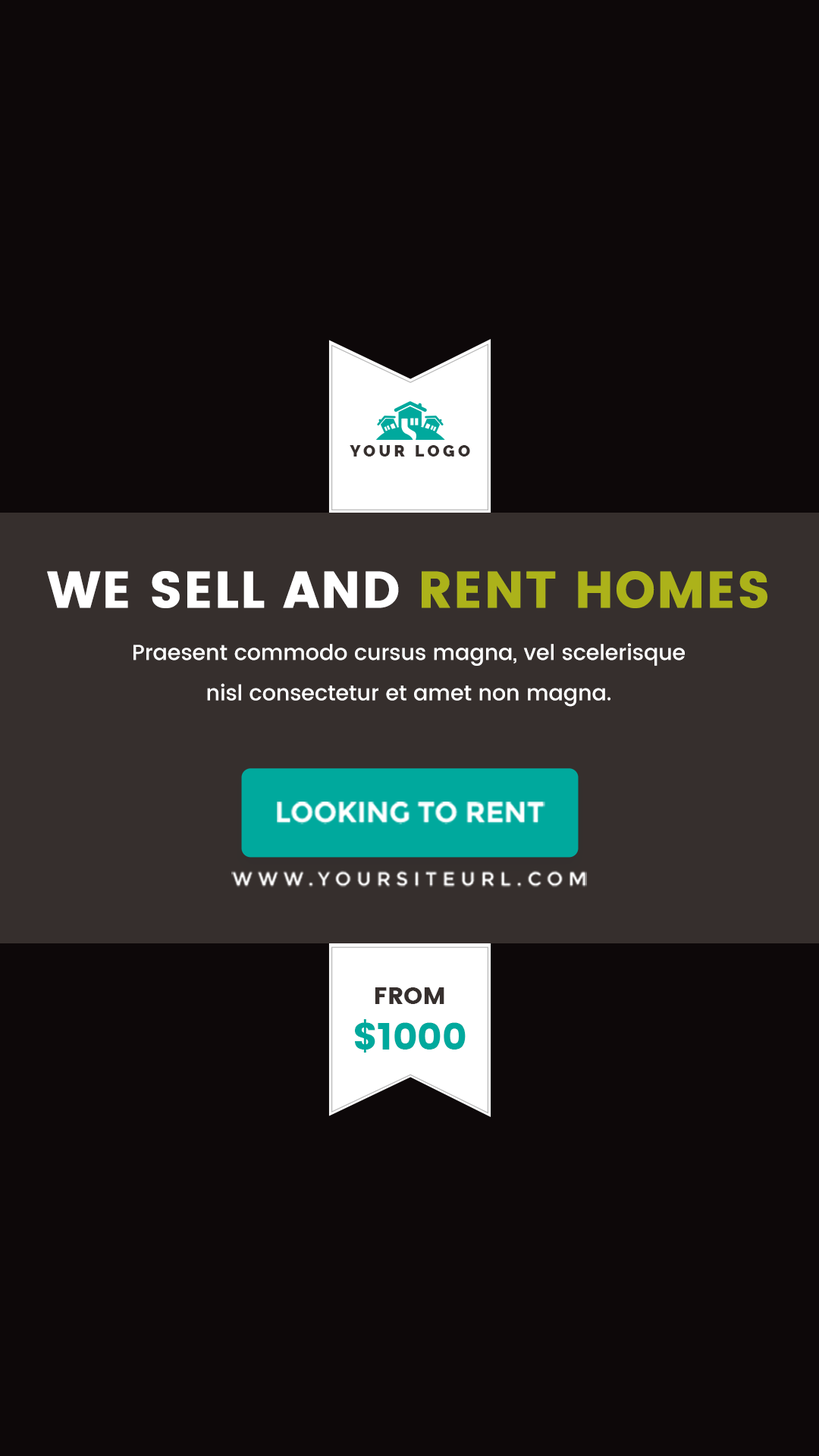
<style>
.page{position:relative;width:819px;height:1456px;background:#0d0809}
.page>*{position:absolute;margin:0}
.t1{font:16.2px "Raleway-Black";letter-spacing:0.2em;color:#362f2d;text-transform:uppercase}
.t2{font:51.2px "Poppins";color:#ffffff;text-transform:uppercase;font-weight:bold}
.t3{font:51.2px "Poppins";color:#acb21a;text-transform:uppercase;font-weight:bold}
.t4{font:21.5px/40.4px "Poppins-Medium";color:#ffffff}
.t5{font:28.3px "Montserrat-Bold";color:#ffffff;text-transform:uppercase}
.t6{font:18.8px "Montserrat-Regular";letter-spacing:0.3em;color:#ffffff;text-transform:uppercase}
.t7{font:37.7px/45.8px "Poppins";color:#00a99d;text-transform:uppercase}
.t8{font:24.2px/45.8px "Poppins";color:#362f2d;text-transform:uppercase}
</style>
<div class="page">
<p class="t1" style="left:350px;top:445px;width:120px;height:12px">your logo</p>
<p class="t2" style="left:47px;top:571px;width:720px;height:37px">we sell and <span class="t3">rent homes</span></p>
<p class="t4" style="left:133px;top:643px;width:552px;height:64px;text-align:center">Praesent commodo cursus magna, vel scelerisque nisl consectetur et amet non magna.</p>
<p class="t5" style="left:277px;top:802px;width:268px;height:22px">looking to rent</p>
<p class="t6" style="left:231px;top:871px;width:356px;height:16px">www.yoursiteurl.com</p>
<p class="t7" style="left:355px;top:987px;width:111px;height:66px;text-align:center"><span class="t8">from<br></span>$1000</p>
</div>
